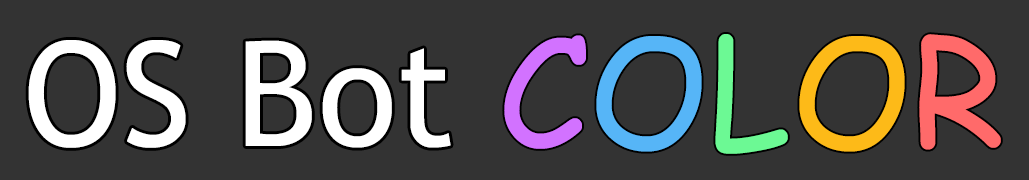
<style>
.page{position:relative;width:1029px;height:180px;background:#333333}
.page>*{position:absolute;margin:0}
.t1{font:145.8px "TrebuchetMS";color:#ffffff}
.t2{font:150px "ComicSansMS";color:#d272ff}
.t3{font:150px "ComicSansMS";color:#56b5f7}
.t4{font:150px "ComicSansMS";color:#6cf994}
.t5{font:150px "ComicSansMS";color:#fdba18}
.t6{font:150px "ComicSansMS";color:#ff6a6a}
</style>
<div class="page">
<p class="t1" style="left:28px;top:40px;width:423px;height:108px">OS Bot</p>
<p class="t2" style="left:504px;top:34px;width:497px;height:120px">C<span class="t3">O</span><span class="t4">L</span><span class="t5">O</span><span class="t6">R</span></p>
</div>
